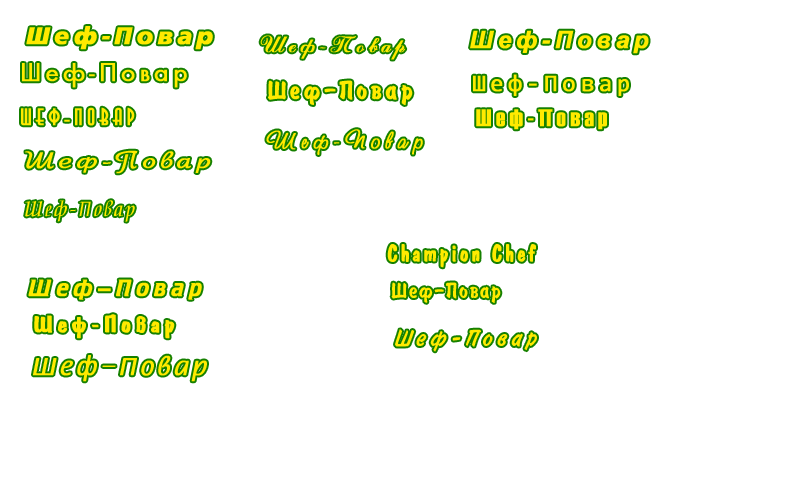
<style>
.page{position:relative;width:800px;height:500px;background:#ffffff}
.page>*{position:absolute;margin:0}
.t1{font:24px "AGForeignerBoldItalic";letter-spacing:0.175em;color:#ffea00;font-weight:bold}
.t2{font:24px "Arial-BoldItalicMT";letter-spacing:0.175em;color:#ffea00;font-weight:bold}
.t3{font:24px "OdessaScriptFWF";letter-spacing:0.175em;color:#ffea00;font-weight:bold}
.t4{font:24px "AGFutura";letter-spacing:0.175em;color:#ffea00;font-weight:bold}
.t5{font:24px "Consolas";letter-spacing:0.175em;color:#ffea00;font-weight:bold}
.t6{font:24px "Painter";letter-spacing:0.175em;color:#ffea00;font-weight:bold}
.t7{font:24px "AnnaCTT";letter-spacing:0.175em;color:#ffea00;font-weight:bold}
.t8{font:24px "Haettenschweiler";letter-spacing:0.175em;color:#ffea00;font-weight:bold}
.t9{font:24px "StudioScriptCTT";letter-spacing:0.175em;color:#ffea00;font-weight:bold}
.t10{font:24px "Arbat";letter-spacing:0.175em;color:#ffea00;font-weight:bold}
.t11{font:24px "Breeze";letter-spacing:0.05em;color:#ffea00}
.t12{font:24px "DomCasualBT-Regular";letter-spacing:0.1em;color:#ffea00;font-weight:bold}
.t13{font:24px "CricketNormal";letter-spacing:0.175em;color:#ffea00;font-weight:bold}
.t14{font:24px "BrushType-Bold";letter-spacing:0.075em;color:#ffea00}
.t15{font:24px "DomkratBold";letter-spacing:0.175em;color:#ffea00;font-weight:bold}
.t16{font:24px "Uk_Inform";letter-spacing:0.175em;color:#ffea00}
.t17{font:24px "FiestaNormal";letter-spacing:0.175em;color:#ffea00;font-weight:bold}
</style>
<div class="page">
<p class="t1" style="left:26px;top:26px;width:187px;height:24px">Øåô-Ïîâàð</p>
<p class="t2" style="left:470px;top:30px;width:179px;height:24px">Шеф-Повар</p>
<p class="t3" style="left:260px;top:35px;width:146px;height:25px">Øåô-Ïîâàð</p>
<p class="t4" style="left:22px;top:63px;width:165px;height:25px">Øåô-Ïîâàð</p>
<p class="t5" style="left:473px;top:74px;width:156px;height:22px">Шеф-Повар</p>
<p class="t6" style="left:268px;top:80px;width:145px;height:25px">Øåô-Ïîâàð</p>
<p class="t7" style="left:21px;top:107px;width:114px;height:19px">Øåô-Ïîâàð</p>
<p class="t8" style="left:476px;top:109px;width:131px;height:21px">Шеф-Повар</p>
<p class="t9" style="left:266px;top:129px;width:157px;height:26px">Øåô-Ïîâàð</p>
<p class="t10" style="left:25px;top:150px;width:186px;height:24px">Øåô-Ïîâàð</p>
<p class="t11" style="left:25px;top:200px;width:110px;height:22px">Øåô-Ïîâàð</p>
<p class="t12" style="left:387px;top:244px;width:149px;height:24px">Champion Chef</p>
<p class="t13" style="left:28px;top:279px;width:174px;height:21px">Øåô-Ïîâàð</p>
<p class="t14" style="left:391px;top:282px;width:110px;height:21px">Øåô-Ïîâàð</p>
<p class="t15" style="left:34px;top:314px;width:141px;height:25px">Øåô-Ïîâàð</p>
<p class="t16" style="left:395px;top:329px;width:142px;height:23px">Øåô-Ïîâàð</p>
<p class="t17" style="left:33px;top:355px;width:174px;height:27px">Øåô-Ïîâàð</p>
</div>
